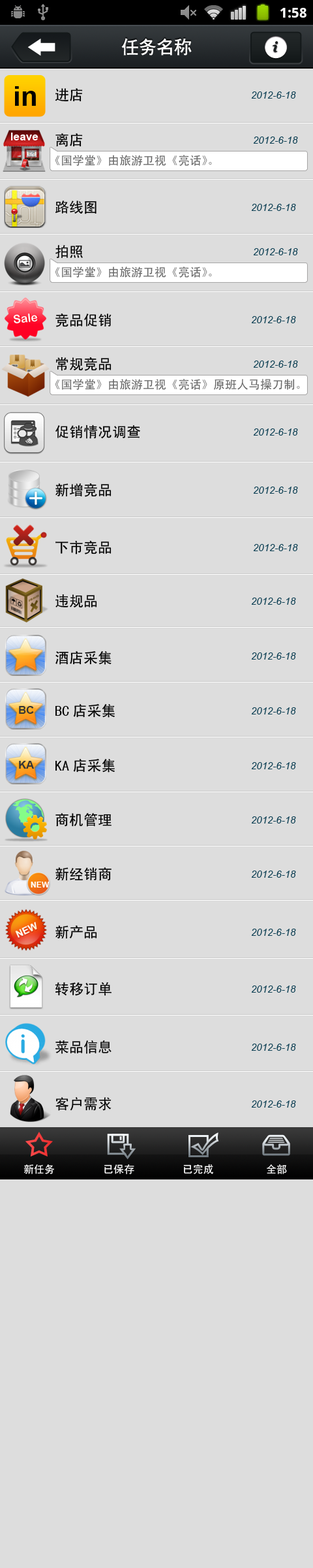
<style>
.page{position:relative;width:313px;height:1568px;background:#dddddd}
.page>*{position:absolute;margin:0}
.t1{font:17.6px "CTCuHeiSJ";color:#ffffff}
.t2{font:27.4px "Arial-BoldMT";color:#000000}
.t3{font:14.4px "SimHei";color:#000000}
.t4{font:9.8px "Arial-ItalicMT";color:#0e4054}
.t5{font:11.3px "Arial-BoldMT";color:#fefefe}
.t6{font:11.8px "SimHei";color:#676767}
.t7{font:10.9px "Arial-BoldMT";color:#373737}
.t8{font:8px "Arial-BoldMT";color:#ffffff}
.t9{font:10.4px "SimHei";color:#ffffff}
</style>
<div class="page">
<p class="t1" style="left:121px;top:38px;width:71px;height:18px">任务名称</p>
<p class="t2" style="left:15px;top:86px;width:21px;height:20px">in</p>
<p class="t3" style="left:55px;top:88px;width:28px;height:14px">进店</p>
<p class="t4" style="left:251px;top:91px;width:45px;height:8px">2012-6-18</p>
<p class="t5" style="left:11px;top:133px;width:28px;height:7px">leave</p>
<p class="t3" style="left:56px;top:133px;width:27px;height:14px">离店</p>
<p class="t4" style="left:253px;top:136px;width:45px;height:8px">2012-6-18</p>
<p class="t6" style="left:55px;top:155px;width:157px;height:11px">《国学堂》由旅游卫视《亮话》。</p>
<p class="t3" style="left:56px;top:200px;width:41px;height:14px">路线图</p>
<p class="t4" style="left:251px;top:204px;width:45px;height:7px">2012-6-18</p>
<p class="t3" style="left:56px;top:245px;width:27px;height:14px">拍照</p>
<p class="t4" style="left:253px;top:248px;width:45px;height:7px">2012-6-18</p>
<p class="t6" style="left:55px;top:266px;width:157px;height:12px">《国学堂》由旅游卫视《亮话》。</p>
<p class="t3" style="left:56px;top:313px;width:56px;height:14px">竞品促销</p>
<p class="t4" style="left:251px;top:316px;width:45px;height:7px">2012-6-18</p>
<p class="t3" style="left:56px;top:357px;width:56px;height:14px">常规竞品</p>
<p class="t4" style="left:253px;top:360px;width:45px;height:8px">2012-6-18</p>
<p class="t6" style="left:55px;top:379px;width:245px;height:11px">《国学堂》由旅游卫视《亮话》原班人马操刀制。</p>
<p class="t3" style="left:56px;top:424px;width:84px;height:15px">促销情况调查</p>
<p class="t4" style="left:253px;top:428px;width:45px;height:8px">2012-6-18</p>
<p class="t3" style="left:56px;top:483px;width:56px;height:14px">新增竞品</p>
<p class="t4" style="left:253px;top:487px;width:45px;height:7px">2012-6-18</p>
<p class="t3" style="left:56px;top:541px;width:56px;height:13px">下市竞品</p>
<p class="t4" style="left:253px;top:544px;width:45px;height:7px">2012-6-18</p>
<p class="t3" style="left:56px;top:594px;width:41px;height:14px">违规品</p>
<p class="t4" style="left:251px;top:598px;width:45px;height:7px">2012-6-18</p>
<p class="t3" style="left:56px;top:651px;width:56px;height:14px">酒店采集</p>
<p class="t4" style="left:251px;top:652px;width:45px;height:8px">2012-6-18</p>
<p class="t7" style="left:19px;top:706px;width:15px;height:8px">BC</p>
<p class="t3" style="left:56px;top:704px;width:59px;height:14px">BC店采集</p>
<p class="t4" style="left:251px;top:707px;width:45px;height:7px">2012-6-18</p>
<p class="t7" style="left:19px;top:761px;width:15px;height:8px">KA</p>
<p class="t3" style="left:56px;top:759px;width:59px;height:14px">KA店采集</p>
<p class="t4" style="left:251px;top:762px;width:45px;height:7px">2012-6-18</p>
<p class="t3" style="left:56px;top:813px;width:56px;height:14px">商机管理</p>
<p class="t4" style="left:251px;top:816px;width:45px;height:8px">2012-6-18</p>
<p class="t3" style="left:56px;top:867px;width:56px;height:14px">新经销商</p>
<p class="t8" style="left:31px;top:882px;width:19px;height:6px">NEW</p>
<p class="t4" style="left:251px;top:871px;width:45px;height:7px">2012-6-18</p>
<p class="t3" style="left:56px;top:925px;width:41px;height:14px">新产品</p>
<p class="t4" style="left:251px;top:929px;width:45px;height:7px">2012-6-18</p>
<p class="t3" style="left:55px;top:982px;width:57px;height:14px">转移订单</p>
<p class="t4" style="left:251px;top:985px;width:45px;height:8px">2012-6-18</p>
<p class="t3" style="left:56px;top:1040px;width:56px;height:14px">菜品信息</p>
<p class="t4" style="left:251px;top:1044px;width:45px;height:7px">2012-6-18</p>
<p class="t3" style="left:56px;top:1097px;width:56px;height:14px">客户需求</p>
<p class="t4" style="left:251px;top:1100px;width:45px;height:8px">2012-6-18</p>
<p class="t9" style="left:24px;top:1164px;width:30px;height:10px">新任务</p>
<p class="t9" style="left:104px;top:1164px;width:31px;height:10px">已保存</p>
<p class="t9" style="left:184px;top:1164px;width:30px;height:10px">已完成</p>
<p class="t9" style="left:267px;top:1164px;width:20px;height:10px">全部</p>
</div>
